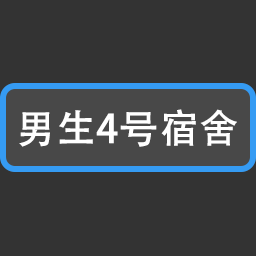
<style>
.page{position:relative;width:256px;height:256px;background:#333333}
.page>*{position:absolute;margin:0}
.t1{font:39px "AdobeHeitiStd-Regular";color:#ffffff;font-weight:bold}
</style>
<div class="page">
<p class="t1" style="left:19px;top:109px;width:218px;height:38px">男生4号宿舍</p>
</div>
